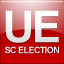
<style>
.page{position:relative;width:64px;height:64px}
.page>*{position:absolute;margin:0}
.t1{font:44px "Arial-BoldMT";letter-spacing:-0.06em;color:#ffffff}
.t2{font:9px "Arial-BoldMT";letter-spacing:-0.06em;color:#ffffff}
</style>
<div class="page">
<p class="t1" style="left:5px;top:10px;width:54px;height:33px">UE</p>
<p class="t2" style="left:5px;top:46px;width:54px;height:8px">SC ELECTION</p>
</div>
